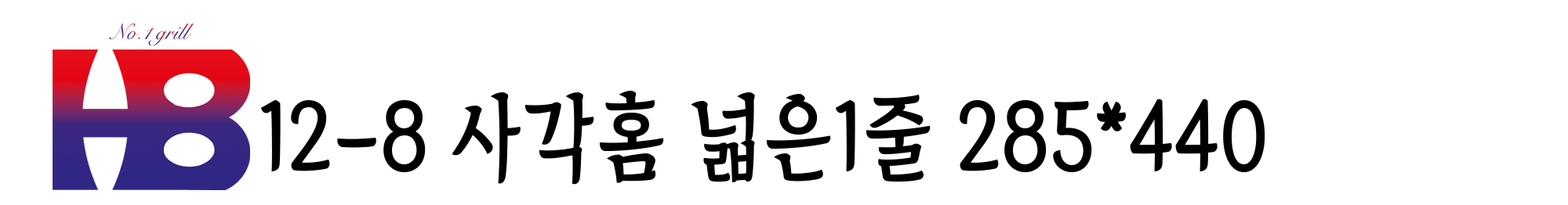
<style>
.page{position:relative;width:1568px;height:205px;background:#ffffff}
.page>*{position:absolute;margin:0}
.t1{font:93.7px "TheIndependenceHallofKorea-Regular";color:#000000;scale:0.89 1}
</style>
<div class="page">
<p class="t1" style="left:261px;top:91px;width:1004px;height:94px">12-8 사각홈 넓은1줄 285*440</p>
</div>
